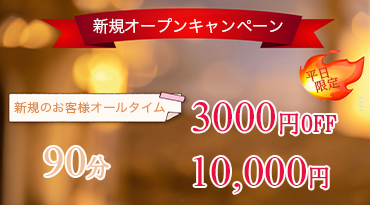
<style>
.page{position:relative;width:370px;height:205px}
.page>*{position:absolute;margin:0}
.t1{font:16px "HiraKakuPro-W3";color:#faf9f8}
.t2{font:12.7px/12px "SimSong-Bold";color:#d72b1e}
.t3{font:12px "HiraKakuPro-W3";color:#df9051;scale:1.06 1}
.t4{font:43px "TimesNewRomanPSMT";color:#e80f42}
.t5{font:24px "SimSong-Bold";color:#e80f42}
</style>
<div class="page">
<p class="t1" style="left:93px;top:18px;width:190px;height:16px">新規オープンキャンペーン</p>
<p class="t2" style="left:305px;top:66px;width:35px;height:27px;text-align:center;rotate:-15deg">平日<br>  限定</p>
<p class="t3" style="left:14px;top:101px;width:151px;height:13px">新規のお客様オールタイム</p>
<p class="t4" style="left:192px;top:102px;width:145px;height:33px">3000<span class="t5">円OFF</span></p>
<p class="t4" style="left:194px;top:157px;width:135px;height:36px">10,000<span class="t5">円</span></p>
</div>
